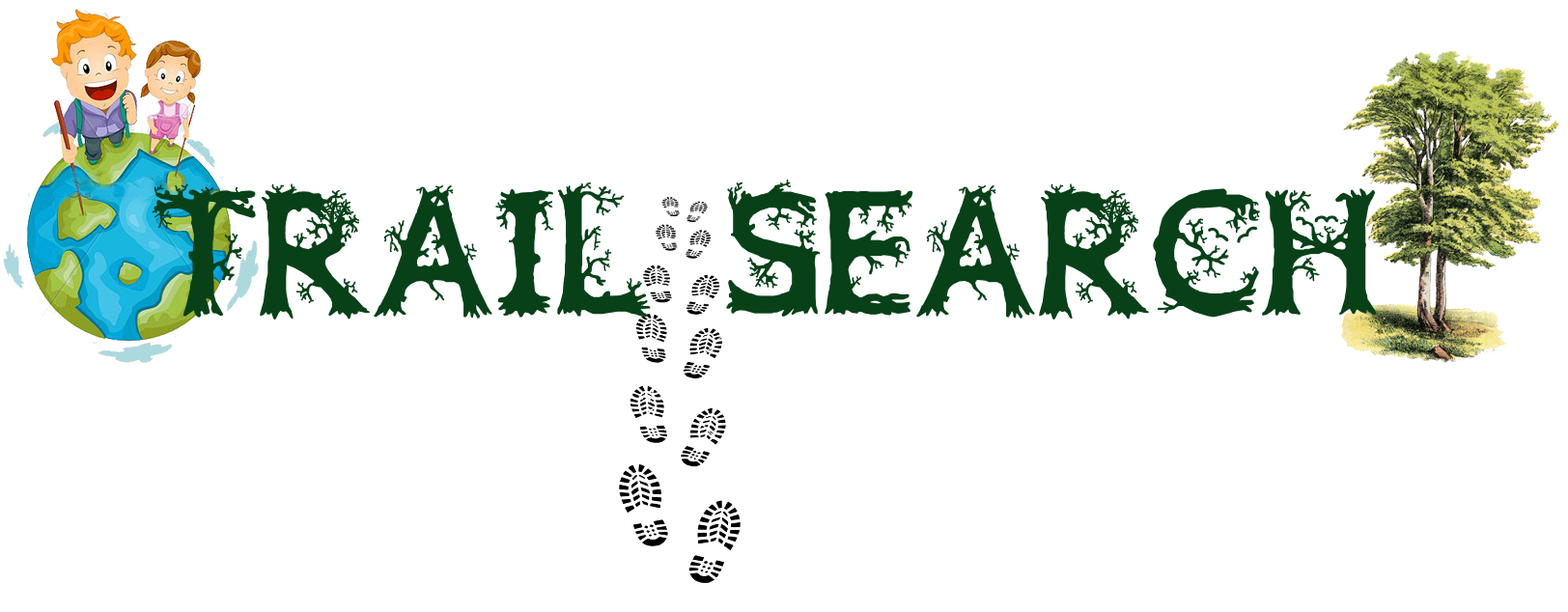
<style>
.page{position:relative;width:1568px;height:612px;background:#ffffff}
.page>*{position:absolute;margin:0}
.t1{font:144.8px "JFWildWood";color:#084118}
</style>
<div class="page">
<p class="t1" style="left:152px;top:180px;width:1225px;height:140px">trail search</p>
</div>
